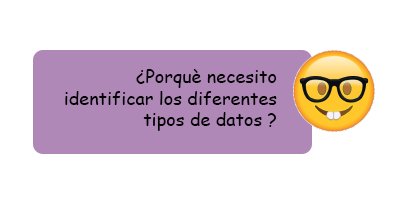
<style>
.page{position:relative;width:400px;height:200px;background:#ffffff}
.page>*{position:absolute;margin:0}
.t1{font:18px "ComicSansMS";color:#000000}
</style>
<div class="page">
<p class="t1" style="left:65px;top:69px;width:212px;height:62px;text-align:right">¿Porquè necesito identificar los diferentes tipos de datos ?</p>
</div>
